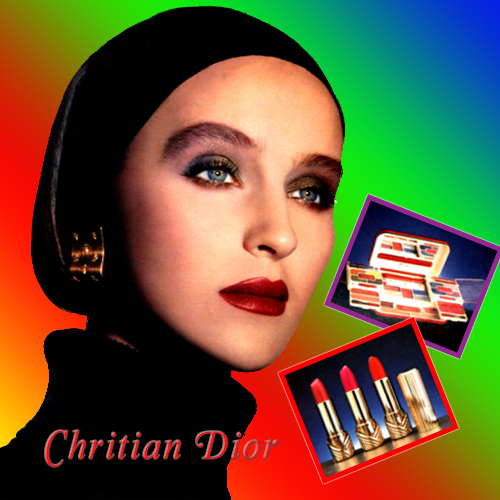
<style>
.page{position:relative;width:500px;height:500px;background:#000000}
.page>*{position:absolute;margin:0}
.t1{font:40.4px "TimesNewRomanPS-ItalicMT";letter-spacing:0.07em;color:#ff0b0a;scale:0.89 1}
</style>
<div class="page">
<p class="t1" style="left:45px;top:430px;width:233px;height:37px">Chritian Dior</p>
</div>
